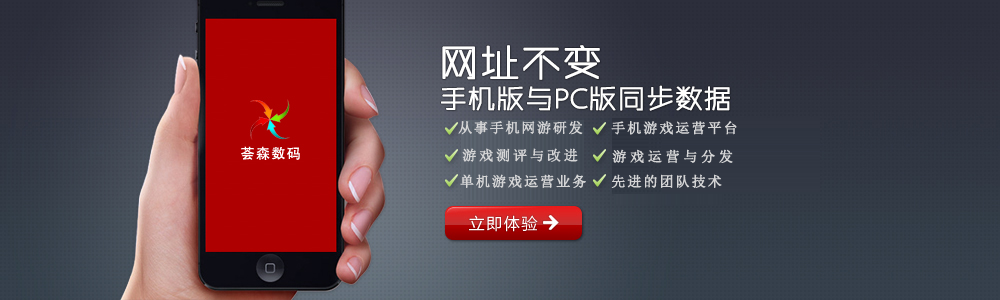
<style>
.page{position:relative;width:1000px;height:300px}
.page>*{position:absolute;margin:0}
.t1{font:14px "NSimSun";letter-spacing:0.1em;color:#d5d5d6;font-weight:bold}
.t2{font:14px "NSimSun";letter-spacing:0.12em;color:#d5d5d6;font-weight:bold}
.t3{font:14px "NSimSun";letter-spacing:0.18em;color:#d5d5d6;font-weight:bold}
.t4{font:14px "NSimSun";letter-spacing:0.24em;color:#d5d5d6;font-weight:bold}
</style>
<div class="page">
<p class="t1" style="left:458px;top:120px;width:125px;height:15px">从事手机网游研发</p>
<p class="t2" style="left:611px;top:121px;width:126px;height:14px">手机游戏运营平台</p>
<p class="t3" style="left:462px;top:148px;width:116px;height:14px">游戏测评与改进</p>
<p class="t4" style="left:612px;top:149px;width:121px;height:15px">游戏运营与分发</p>
<p class="t2" style="left:460px;top:174px;width:126px;height:14px">单机游戏运营业务</p>
<p class="t2" style="left:611px;top:174px;width:111px;height:14px">先进的团队技术</p>
</div>
